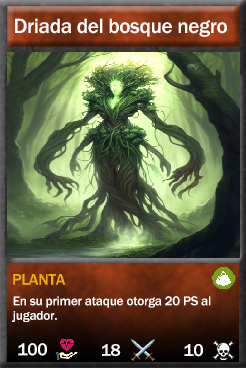
<style>
.page{position:relative;width:246px;height:368px}
.page>*{position:absolute;margin:0}
.t1{font:21.3px "FranklinGothic-Medium";letter-spacing:-0.02em;color:#ffffff}
.t2{font:16px "FranklinGothic-Medium";letter-spacing:-0.02em;color:#f2ac05}
.t3{font:13.3px/14.7px "FranklinGothic-Medium";letter-spacing:-0.02em;color:#ffffff}
.t4{font:17.7px "FranklinGothic-Medium";letter-spacing:-0.02em;color:#ffffff}
.t5{font:17.2px "FranklinGothic-Medium";letter-spacing:-0.02em;color:#ffffff}
</style>
<div class="page">
<p class="t1" style="left:15px;top:18px;width:212px;height:19px">Driada del bosque negro</p>
<p class="t2" style="left:13px;top:274px;width:53px;height:11px">PLANTA</p>
<p class="t3" style="left:12px;top:296px;width:199px;height:26px">En su primer ataque otorga 20 PS al<br>jugador.</p>
<p class="t4" style="left:18px;top:343px;width:29px;height:13px">100</p>
<p class="t5" style="left:102px;top:344px;width:19px;height:12px">18</p>
<p class="t4" style="left:184px;top:344px;width:19px;height:13px">10</p>
</div>
